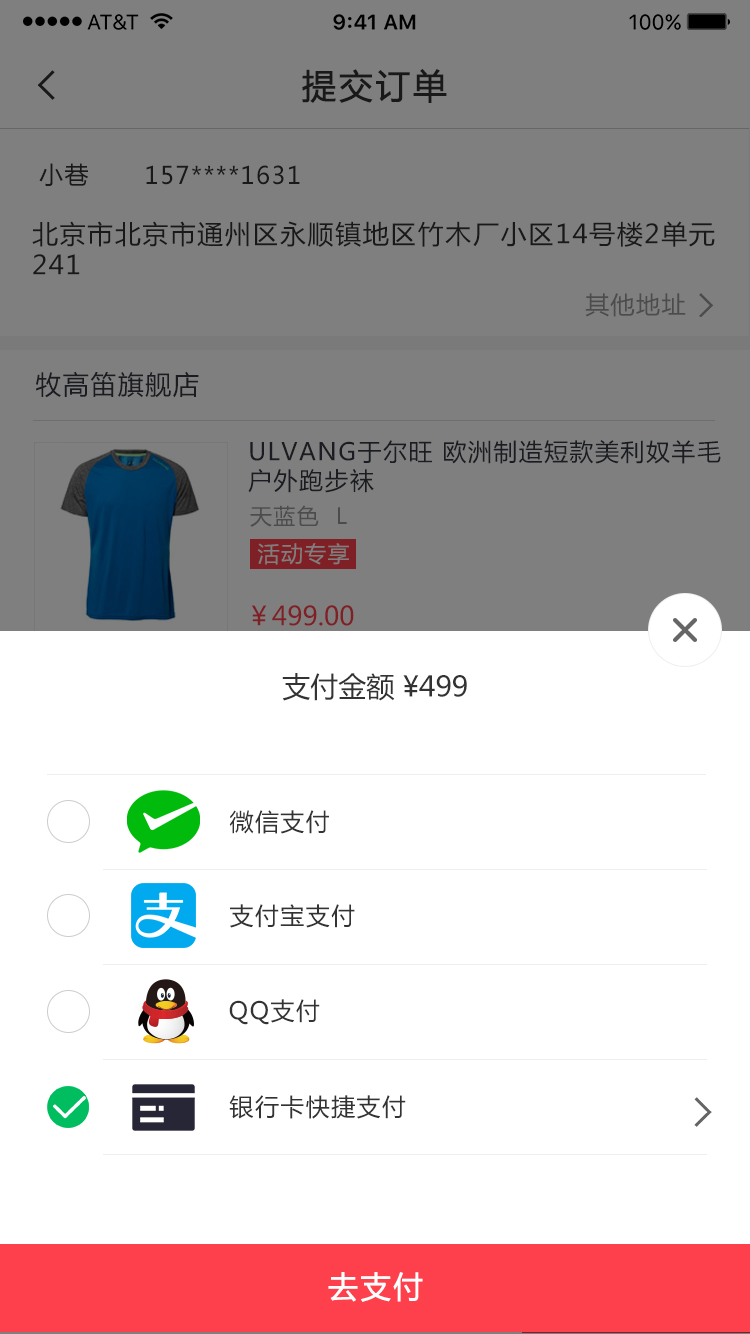
<style>
.page{position:relative;width:750px;height:1334px;background:#ffffff}
.page>*{position:absolute;margin:0}
.t1{font:34px "MicrosoftYaHei";letter-spacing:0.06em;color:#191919;font-weight:bold}
.t2{font:24px "MicrosoftYaHei";letter-spacing:0.06em;color:#191919}
.t3{font:26px "MicrosoftYaHei";letter-spacing:0.06em;color:#191919}
.t4{font:24px "MicrosoftYaHei";letter-spacing:0.06em;color:#4c4c4c}
.t5{font:26px "MicrosoftYaHei";letter-spacing:0.06em;color:#1a1c21}
.t6{font:24px "MicrosoftYaHei";letter-spacing:0.06em;color:#1a1c21}
.t7{font:22px "MicrosoftYaHei";letter-spacing:0.06em;color:#4c4c4c}
.t8{font:22px "MicrosoftYaHei";letter-spacing:0.06em;color:#7f7f7f}
.t9{font:26px "MicrosoftYaHei";color:#7f2026}
.t10{font:28px "MicrosoftYaHei";color:#333333}
.t11{font:24px "MicrosoftYaHei";letter-spacing:0.06em;color:#333333}
.t12{font:30px "MicrosoftYaHei";letter-spacing:0.06em;color:#ffffff;font-weight:bold}
</style>
<div class="page">
<p class="t1" style="left:302px;top:69px;width:145px;height:34px">提交订单</p>
<p class="t2" style="left:39px;top:163px;width:50px;height:23px">小巷</p>
<p class="t2" style="left:146px;top:165px;width:154px;height:20px">157****1631</p>
<p class="t3" style="left:32px;top:221px;width:683px;height:54px">北京市北京市通州区永顺镇地区竹木厂小区14号楼2单元<br>241</p>
<p class="t4" style="left:585px;top:293px;width:101px;height:24px">其他地址</p>
<p class="t5" style="left:36px;top:371px;width:163px;height:27px">牧高笛旗舰店</p>
<p class="t6" style="left:248px;top:440px;width:473px;height:53px">ULVANG于尔旺 欧洲制造短款美利奴羊毛户外跑步袜</p>
<p class="t7" style="left:250px;top:505px;width:97px;height:22px">天蓝色  L</p>
<p class="t8" style="left:257px;top:543px;width:92px;height:22px">活动专享</p>
<p class="t9" style="left:251px;top:605px;width:103px;height:21px">￥499.00</p>
<p class="t10" style="left:282px;top:673px;width:185px;height:28px">支付金额 ¥499</p>
<p class="t11" style="left:229px;top:810px;width:100px;height:24px">微信支付</p>
<p class="t11" style="left:230px;top:904px;width:125px;height:24px">支付宝支付</p>
<p class="t11" style="left:229px;top:999px;width:91px;height:26px">QQ支付</p>
<p class="t11" style="left:229px;top:1095px;width:177px;height:24px">银行卡快捷支付</p>
<p class="t12" style="left:328px;top:1272px;width:95px;height:30px">去支付</p>
</div>
